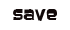
<style>
.page{position:relative;width:70px;height:30px;background:#ffffff}
.page>*{position:absolute;margin:0}
.t1{font:14px "Baveuse";color:#120a0a}
</style>
<div class="page">
<p class="t1" style="left:13px;top:9px;width:44px;height:12px">Save</p>
</div>
